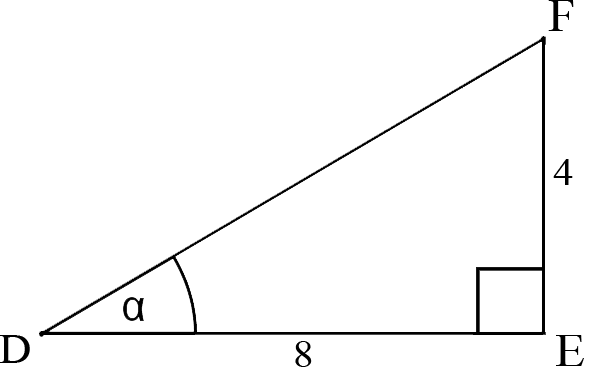
<style>
.page{position:relative;width:591px;height:376px;background:#ffffff}
.page>*{position:absolute;margin:0}
.t1{font:46px "TimesNewRomanPSMT";letter-spacing:-0.04em;color:#000000;scale:1.08 1}
.t2{font:38.3px "TimesNewRomanPSMT";letter-spacing:-0.04em;color:#000000;scale:1.08 1}
.t3{font:42.2px "TimesNewRomanPSMT";letter-spacing:-0.04em;color:#000000;scale:1.08 1}
</style>
<div class="page">
<p class="t1" style="left:548px;top:0px;width:26px;height:31px">F</p>
<p class="t2" style="left:553px;top:159px;width:20px;height:26px">4</p>
<p class="t3" style="left:0px;top:335px;width:30px;height:28px">D</p>
<p class="t2" style="left:295px;top:341px;width:17px;height:26px">8</p>
<p class="t1" style="left:556px;top:335px;width:28px;height:31px">E</p>
</div>
